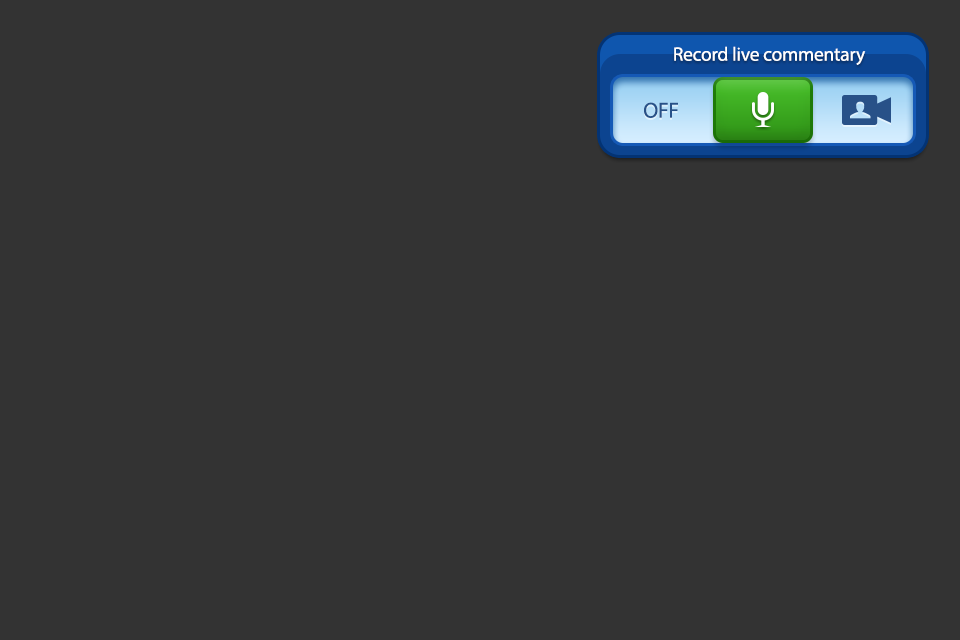
<style>
.page{position:relative;width:960px;height:640px;background:#333333}
.page>*{position:absolute;margin:0}
.t1{font:19.4px "MyriadPro-Regular";letter-spacing:-0.01em;color:#ffffff}
.t2{font:21.7px "MyriadPro-Regular";letter-spacing:-0.01em;color:#285188}
</style>
<div class="page">
<p class="t1" style="left:674px;top:46px;width:192px;height:19px">Record live commentary</p>
<p class="t2" style="left:644px;top:102px;width:34px;height:16px">OFF</p>
</div>
